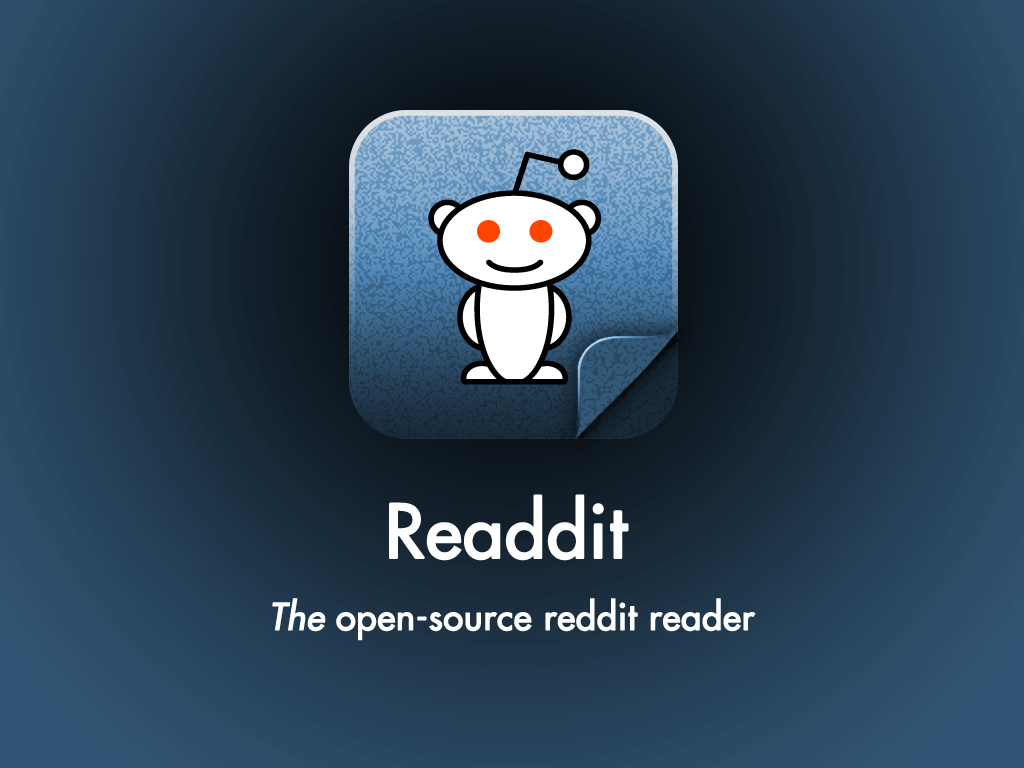
<style>
.page{position:relative;width:1024px;height:768px}
.page>*{position:absolute;margin:0}
.t1{font:72px "FuturaStd-Medium";color:#ffffff;font-weight:bold}
.t2{font:36px "FuturaStd-Medium";color:#ffffff;font-weight:bold}
.t3{font:36px "FuturaStd-MediumOblique";color:#ffffff;font-weight:bold}
</style>
<div class="page">
<p class="t1" style="left:389px;top:494px;width:240px;height:67px">Readdit</p>
<p class="t2" style="left:272px;top:598px;width:484px;height:43px"><span class="t3">The </span>open-source reddit reader</p>
</div>
